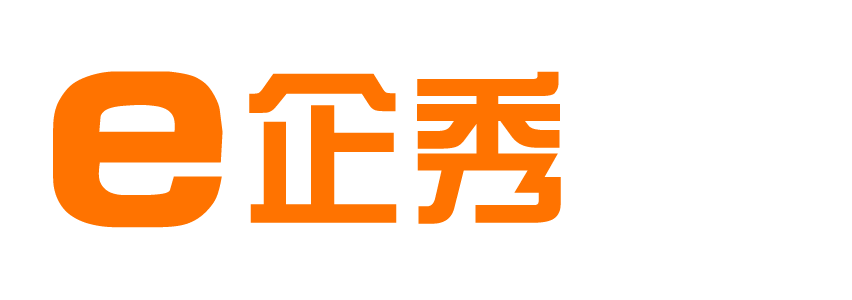
<style>
.page{position:relative;width:852px;height:300px;background:#ffffff}
.page>*{position:absolute;margin:0}
.t1{font:316.7px "HYk1gj";color:#ff7300}
.t2{font:166.7px "HYk1gj";color:#ff7300}
</style>
<div class="page">
<p class="t1" style="left:53px;top:71px;width:170px;height:157px">e</p>
<p class="t2" style="left:249px;top:71px;width:312px;height:153px">企秀</p>
</div>
